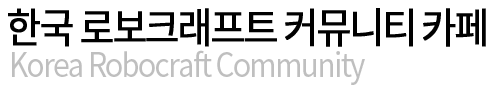
<style>
.page{position:relative;width:501px;height:90px;background:#ffffff}
.page>*{position:absolute;margin:0}
.t1{font:42px "NotoSansCJKkr-Regular";letter-spacing:-0.075em;color:#000000;font-weight:bold;scale:0.9 1}
.t2{font:33px "NotoSansCJKkr-Regular";letter-spacing:-0.055em;color:#bfbfbf;scale:0.9 1}
</style>
<div class="page">
<p class="t1" style="left:8px;top:8px;width:478px;height:39px">한국 로보크래프트 커뮤니티 카페</p>
<p class="t2" style="left:12px;top:50px;width:353px;height:35px">Korea Robocraft Community</p>
</div>
